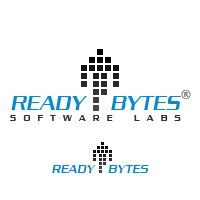
<style>
.page{position:relative;width:200px;height:200px;background:#ffffff}
.page>*{position:absolute;margin:0}
.t1{font:21px "Dungeon-Regular";color:#0aa2dd;font-style:italic}
.t2{font:21px "Dungeon-Regular";color:#09a2dd;font-style:italic}
.t3{font:12px "OpenSans";color:#666666}
.t4{font:9px "Dungeon-Regular";letter-spacing:0.802em;color:#363636}
.t5{font:12px "Dungeon-Regular";color:#0088cc;font-style:italic}
</style>
<div class="page">
<p class="t1" style="left:11px;top:96px;width:76px;height:14px">READY</p>
<p class="t2" style="left:111px;top:96px;width:70px;height:14px">BYTES</p>
<p class="t3" style="left:181px;top:90px;width:10px;height:9px">®</p>
<p class="t4" style="left:10px;top:115px;width:103px;height:6px">SOFTWARE</p>
<p class="t4" style="left:134px;top:115px;width:47px;height:6px">LABS</p>
<p class="t5" style="left:52px;top:165px;width:97px;height:8px">READY    BYTES</p>
</div>
